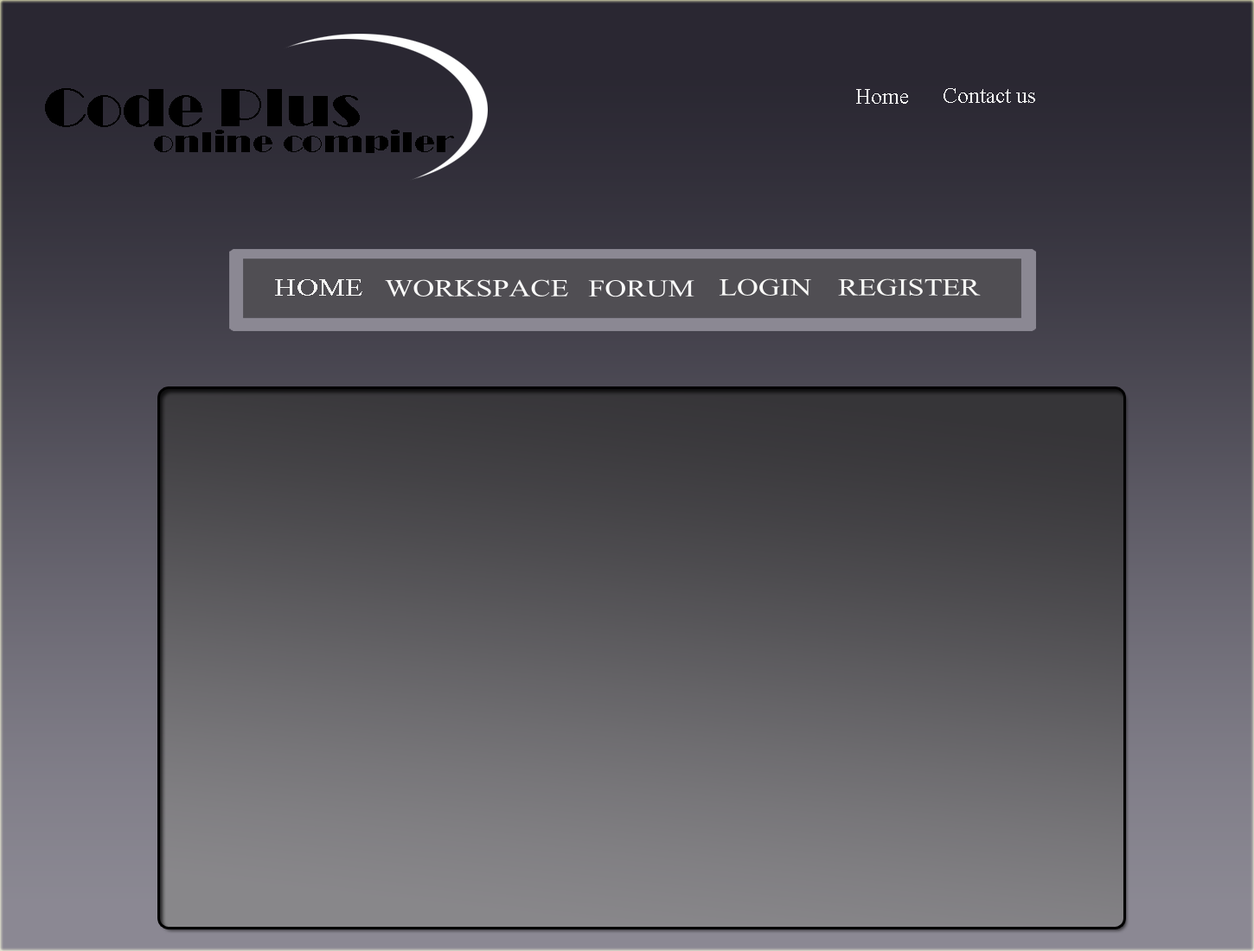
<style>
.page{position:relative;width:1254px;height:951px}
.page>*{position:absolute;margin:0}
.t1{font:56.2px "Broadway";color:#000000;scale:1.07 1}
.t2{font:21.6px "TimesNewRomanPSMT";color:#f6f6f5}
.t3{font:30.5px "Broadway";color:#000000;scale:1.15 1}
.t4{font:25.2px "TimesNewRomanPSMT";color:#f6f6f5;scale:1.22 1}
</style>
<div class="page">
<p class="t1" style="left:45px;top:88px;width:315px;height:39px">Code Plus</p>
<p class="t2" style="left:856px;top:89px;width:52px;height:15px">Home</p>
<p class="t2" style="left:943px;top:88px;width:92px;height:15px">Contact us</p>
<p class="t3" style="left:154px;top:130px;width:300px;height:23px">online compiler</p>
<p class="t4" style="left:275px;top:279px;width:87px;height:17px">HOME</p>
</div>
